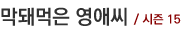
<style>
.page{position:relative;width:183px;height:35px;background:#ffffff}
.page>*{position:absolute;margin:0}
.t1{font:20px "KoPubDotumBold";color:#323232}
.t2{font:12px "KoPubDotumBold";color:#870000}
</style>
<div class="page">
<p class="t1" style="left:1px;top:7px;width:180px;height:19px">막돼먹은 영애씨 <span class="t2">/ 시즌 15</span></p>
</div>
